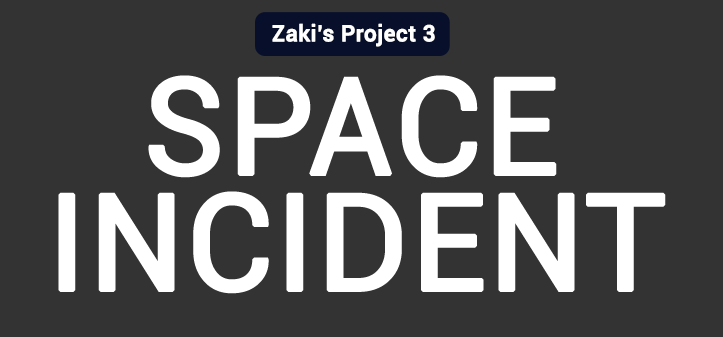
<style>
.page{position:relative;width:723px;height:337px;background:#333333}
.page>*{position:absolute;margin:0}
.t1{font:22.4px "Roboto-Medium";color:#ffffff;font-weight:bold}
.t2{font:134px "Roboto-Regular";color:#ffffff;font-weight:bold}
</style>
<div class="page">
<p class="t1" style="left:272px;top:23px;width:163px;height:24px">Zaki’s Project 3</p>
<p class="t2" style="left:148px;top:75px;width:409px;height:103px">SPACE</p>
<p class="t2" style="left:58px;top:191px;width:608px;height:103px">INCIDENT</p>
</div>
